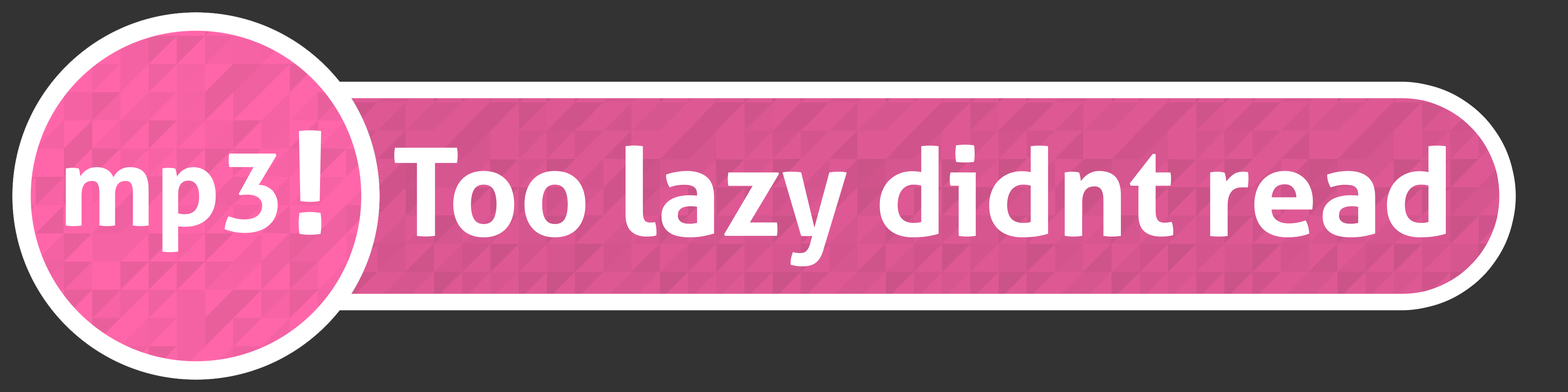
<style>
.page{position:relative;width:1568px;height:392px;background:#333333}
.page>*{position:absolute;margin:0}
.t1{font:122.6px "Aller-Bold";color:#ffffff}
</style>
<div class="page">
<p class="t1" style="left:394px;top:144px;width:1052px;height:122px">Too lazy didnt read</p>
</div>
